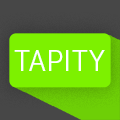
<style>
.page{position:relative;width:120px;height:120px;background:#7df100}
.page>*{position:absolute;margin:0}
.t1{font:30px "SanFranciscoDisplay-Regular";letter-spacing:0.02em;color:#ffffff}
</style>
<div class="page">
<p class="t1" style="left:14px;top:50px;width:91px;height:21px">TAPITY</p>
</div>
